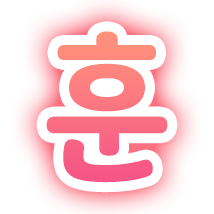
<style>
.page{position:relative;width:214px;height:214px;background:#ffffff}
.page>*{position:absolute;margin:0}
.t1{font:146.7px "Binggrae-Bold";text-transform:uppercase;scale:0.91 1}
</style>
<div class="page">
<p class="t1" style="left:46px;top:31px;width:122px;height:152px">훈</p>
</div>
